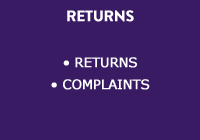
<style>
.page{position:relative;width:200px;height:140px;background:#381b63}
.page>*{position:absolute;margin:0}
.t1{font:15px "BrandonGrotesque-Bold";letter-spacing:-0.02em;color:#ffffff;font-weight:bold}
.t2{font:13px/22px "Verdana";letter-spacing:-0.02em;color:#ffffff;font-weight:bold}
</style>
<div class="page">
<p class="t1" style="left:67px;top:10px;width:67px;height:12px">RETURNS</p>
<p class="t2" style="left:51px;top:57px;width:99px;height:33px;text-align:center">• RETURNS<br>• COMPLAINTS</p>
</div>
